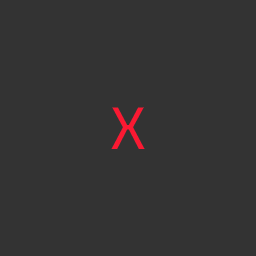
<style>
.page{position:relative;width:256px;height:256px;background:#333333}
.page>*{position:absolute;margin:0}
.t1{font:59.8px "Exo2-Regular";color:#fa1932}
</style>
<div class="page">
<p class="t1" style="left:111px;top:107px;width:34px;height:42px">X</p>
</div>
